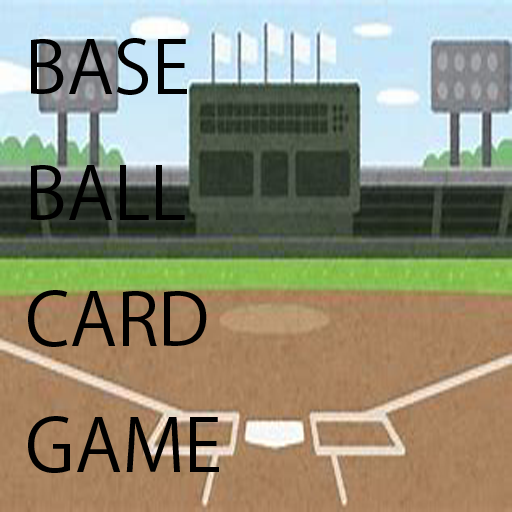
<style>
.page{position:relative;width:512px;height:512px}
.page>*{position:absolute;margin:0}
.t1{font:72px "KozGoPro-Regular";color:#000000}
</style>
<div class="page">
<p class="t1" style="left:28px;top:38px;width:191px;height:435px">BASE<br>BALL<br>CARD<br>GAME</p>
</div>
